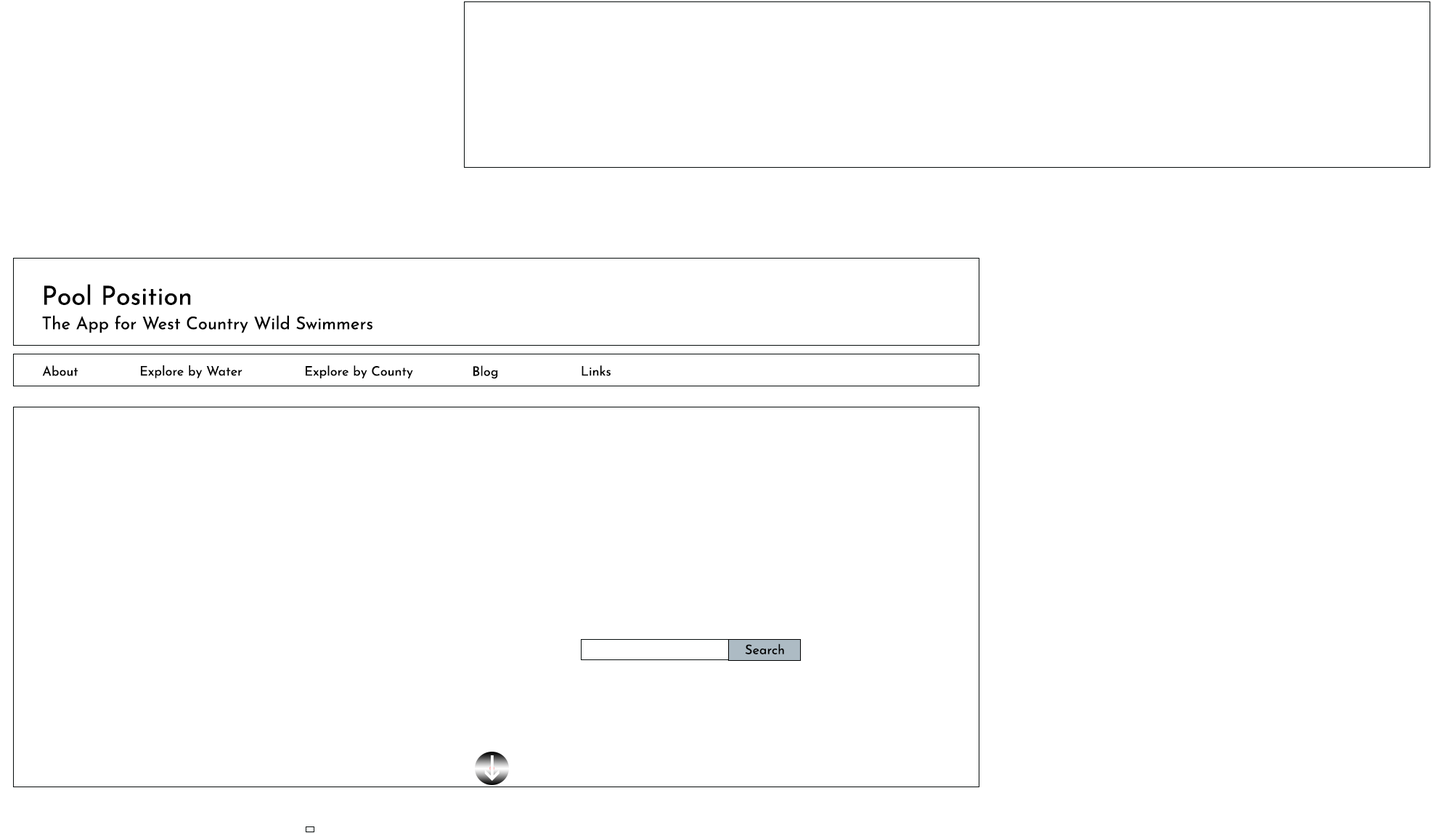
<style>
.page{position:relative;width:1431px;height:833px;background:#ffffff}
.page>*{position:absolute;margin:0}
.t1{font:17.4px "JosefinSans-Regular";color:#000000}
.t2{font:26.1px "JosefinSans-Regular";color:#000000}
.t3{font:13.1px "JosefinSans-Regular";color:#000000}
</style>
<div class="page">
<p class="t1" style="left:42px;top:284px;width:331px;height:49px"><span class="t2">Pool Position   <br></span>The App for West Country Wild Swimmers</p>
<p class="t3" style="left:42px;top:365px;width:36px;height:11px">About</p>
<p class="t3" style="left:141px;top:365px;width:102px;height:13px">Explore by Water</p>
<p class="t3" style="left:306px;top:365px;width:107px;height:13px">Explore by County</p>
<p class="t3" style="left:474px;top:365px;width:24px;height:14px">Blog</p>
<p class="t3" style="left:582px;top:365px;width:29px;height:11px">Links</p>
<p class="t3" style="left:745px;top:643px;width:39px;height:11px">Search</p>
</div>
